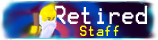
<style>
.page{position:relative;width:158px;height:40px}
.page>*{position:absolute;margin:0}
.t1{font:20.9px "Terminal";color:#ffffff;scale:0.87 1}
.t2{font:13px "Terminal";color:#ffff00;scale:0.87 1}
</style>
<div class="page">
<p class="t1" style="left:54px;top:5px;width:93px;height:19px">Retired</p>
<p class="t2" style="left:80px;top:25px;width:39px;height:11px">Staff</p>
</div>
